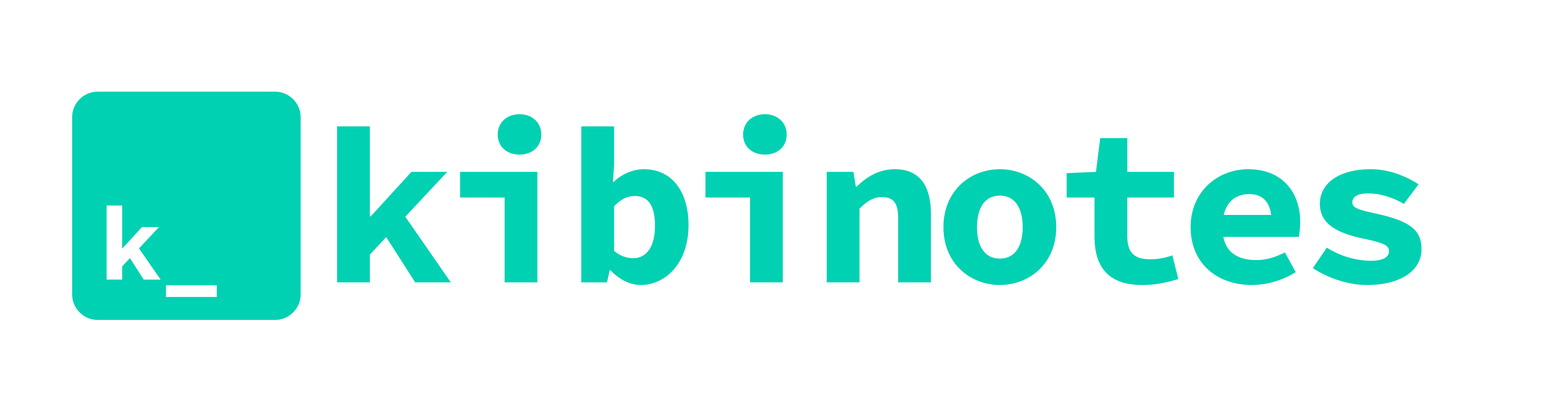
<style>
.page{position:relative;width:1568px;height:401px;background:#ffffff}
.page>*{position:absolute;margin:0}
.t1{font:222.9px "SourceCodeRoman-Bold";letter-spacing:-0.05em;color:#00d1b2}
</style>
<div class="page">
<p class="t1" style="left:337px;top:114px;width:1085px;height:171px">kibinotes</p>
</div>
